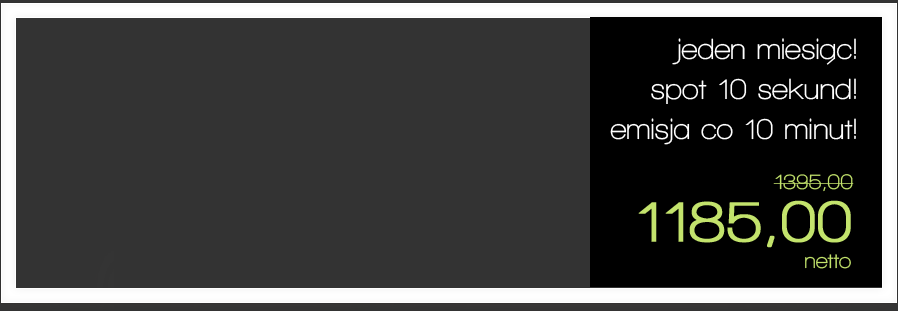
<style>
.page{position:relative;width:898px;height:311px;background:#333333}
.page>*{position:absolute;margin:0}
.t1{font:30px/40px "WalkwayBold";color:#ffffff}
.t2{font:30px/50px "WalkwayBold";color:#ffffff}
.t3{font:22px/52px "WalkwayBold";color:#c3e36c}
.t4{font:60px/52px "WalkwayBold";color:#c3e36c;font-weight:bold}
.t5{font:22px "WalkwayBold";color:#c3e36c}
</style>
<div class="page">
<p class="t1" style="left:610px;top:38px;width:246px;height:107px;text-align:right"><span class="t2"> </span>jeden miesiac!<br>spot 10 sekund!<br>emisja co 10 minut!</p>
<p class="t3" style="left:638px;top:174px;width:216px;height:74px;text-align:right">1395,00<br><span class="t4">1185,00</span></p>
<p class="t5" style="left:805px;top:254px;width:46px;height:15px">netto</p>
</div>
